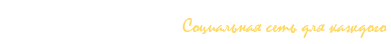
<style>
.page{position:relative;width:391px;height:44px;background:#ffffff}
.page>*{position:absolute;margin:0}
.t1{font:20px "Mistral";color:#ffd965}
.t2{font:20px "BradleyHandITC";color:#ffd965}
</style>
<div class="page">
<p class="t1" style="left:182px;top:18px;width:205px;height:20px"><span class="t2">     </span>Социальная сеть для каждого</p>
</div>
